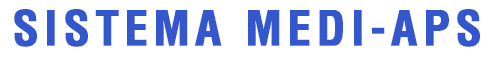
<style>
.page{position:relative;width:490px;height:60px;background:#ffffff}
.page>*{position:absolute;margin:0}
.t1{font:46.7px "Helvetica-Condensed-Bold";letter-spacing:0.1em;color:#3457cd;font-weight:bold}
</style>
<div class="page">
<p class="t1" style="left:14px;top:9px;width:466px;height:38px">SISTEMA MEDI-APS APS</p>
</div>
